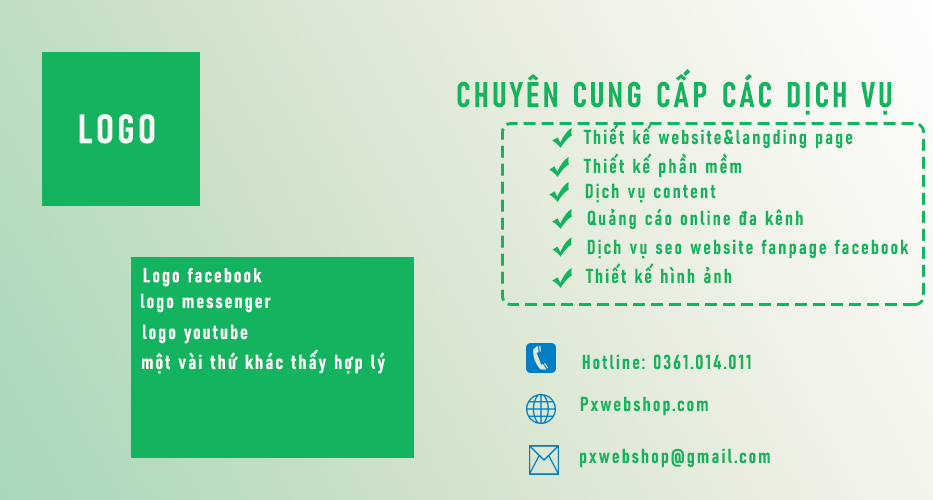
<style>
.page{position:relative;width:933px;height:500px}
.page>*{position:absolute;margin:0}
.t1{font:35px "Bahnschrift-SemiBoldCondensed";letter-spacing:0.1em;color:#14b35f}
.t2{font:40px "Bahnschrift-SemiBoldCondensed";letter-spacing:0.1em;color:#f7f9f8}
.t3{font:20px "Bahnschrift-SemiBoldCondensed";letter-spacing:0.1em;color:#14b35f}
.t4{font:20px "Bahnschrift-SemiBoldCondensed";letter-spacing:0.1em;color:#f7f9f8}
.t5{font:20px "Bahnschrift-SemiBoldCondensed";letter-spacing:0.1em;color:#f7faf8}
</style>
<div class="page">
<p class="t1" style="left:457px;top:69px;width:435px;height:46px">CHUYÊN CUNG CẤP CÁC DỊCH VỤ</p>
<p class="t2" style="left:79px;top:114px;width:76px;height:30px">LOGO</p>
<p class="t3" style="left:583px;top:124px;width:270px;height:25px">Thiết kế website&amp;langding page</p>
<p class="t3" style="left:583px;top:153px;width:158px;height:25px">Thiết kế phần mềm</p>
<p class="t3" style="left:585px;top:183px;width:131px;height:20px">Dịch vụ content</p>
<p class="t3" style="left:587px;top:208px;width:216px;height:22px">Quảng cáo online đa kênh</p>
<p class="t3" style="left:587px;top:239px;width:322px;height:20px">Dịch vụ seo website fanpage facebook</p>
<p class="t4" style="left:143px;top:268px;width:119px;height:19px">Logo facebook</p>
<p class="t3" style="left:585px;top:263px;width:147px;height:21px">Thiết kế hình ảnh</p>
<p class="t4" style="left:141px;top:293px;width:130px;height:20px">logo messenger</p>
<p class="t4" style="left:143px;top:324px;width:105px;height:20px">logo youtube</p>
<p class="t5" style="left:142px;top:349px;width:243px;height:25px">một vài thứ khác thấy hợp lý</p>
<p class="t3" style="left:582px;top:354px;width:169px;height:16px">Hotline: 0361.014.011</p>
<p class="t3" style="left:580px;top:396px;width:128px;height:20px">Pxwebshop.com</p>
<p class="t3" style="left:580px;top:448px;width:190px;height:20px">pxwebshop@gmail.com</p>
</div>
